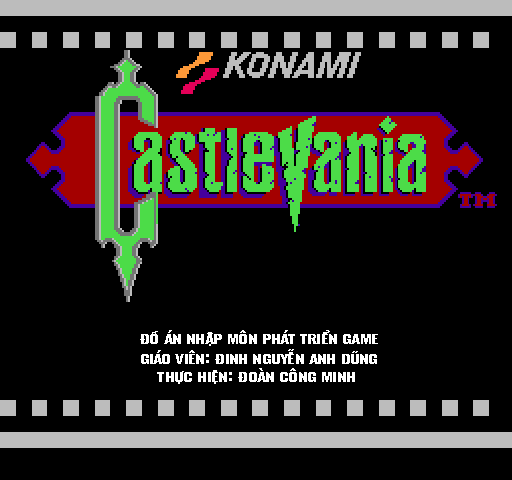
<style>
.page{position:relative;width:512px;height:480px;background:#000000}
.page>*{position:absolute;margin:0}
.t1{font:16.3px "Oswald-Bold";letter-spacing:-0.05em;color:#ffffff;font-variant:small-caps;scale:1.47 1}
</style>
<div class="page">
<p class="t1" style="left:140px;top:330px;width:238px;height:16px">đồ án nhập môn phát triển game</p>
<p class="t1" style="left:141px;top:349px;width:236px;height:15px">giáo viên: đinh nguyễn anh dũng</p>
<p class="t1" style="left:157px;top:368px;width:198px;height:16px">thực hiện: đoàn công minh</p>
</div>
